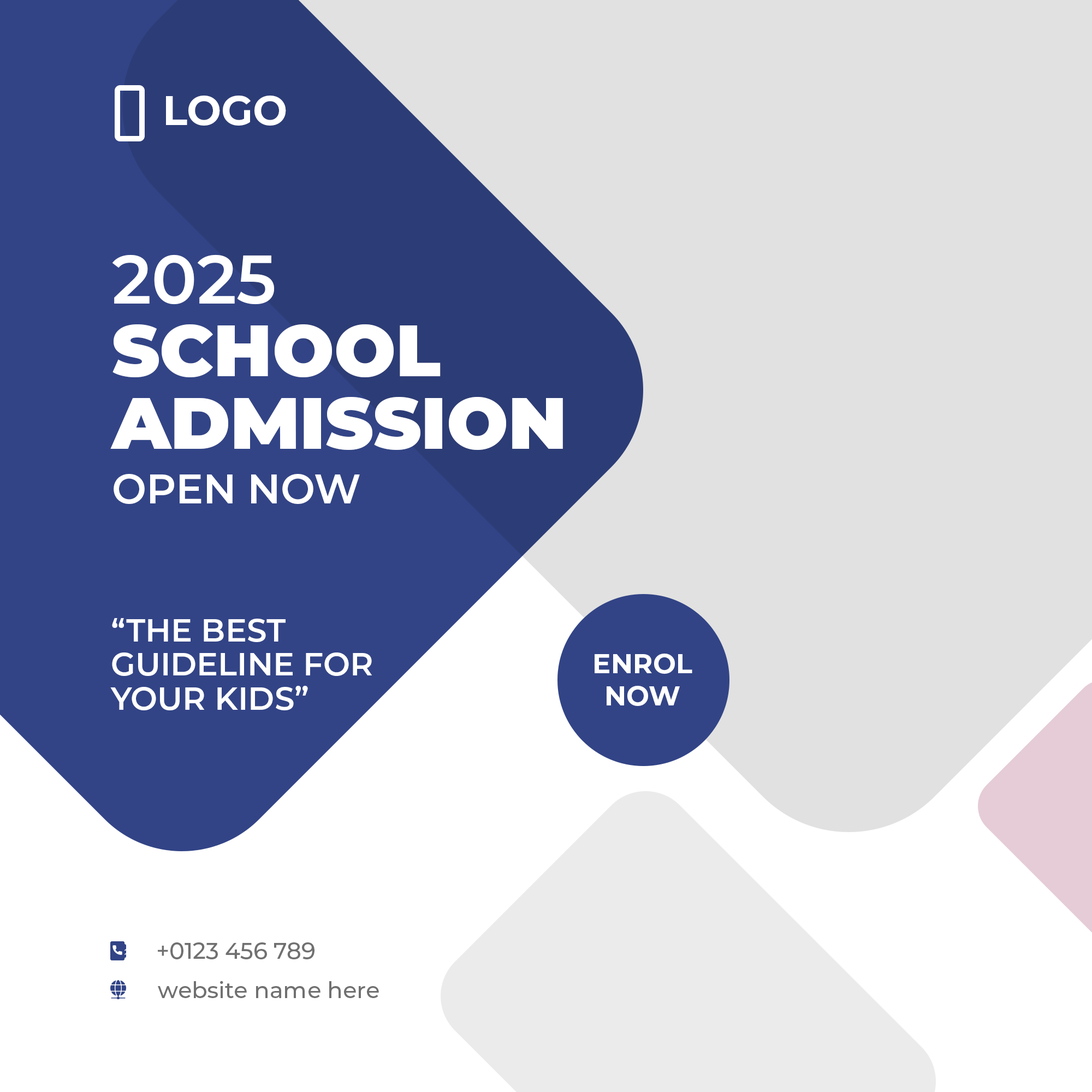
<style>
.page{position:relative;width:1092px;height:1092px;background:#e1e1e1}
.page>*{position:absolute;margin:0}
.t1{font:40.9px "Montserrat-Bold";color:#ffffff;text-transform:uppercase}
.t2{font:72.8px/72.8px "Montserrat-Black";color:#ffffff;text-transform:uppercase}
.t3{font:68.2px/72.8px "Montserrat-SemiBold";color:#ffffff;text-transform:uppercase}
.t4{font:40.9px/54.6px "Montserrat-SemiBold";color:#ffffff;text-transform:uppercase}
.t5{font:31.8px/34.1px "Montserrat-SemiBold";color:#ffffff;text-transform:uppercase}
.t6{font:27.3px/31.8px "Montserrat-Bold";color:#ffffff;text-transform:uppercase}
.t7{font:22.7px "Montserrat-Medium";color:#707070}
</style>
<div class="page">
<p class="t1" style="left:166px;top:96px;width:120px;height:30px">logo</p>
<p class="t2" style="left:110px;top:254px;width:453px;height:250px"><span class="t3">2025<br></span>school<br>admission<br><span class="t4">open now</span></p>
<p class="t5" style="left:110px;top:618px;width:262px;height:92px">“the best<br>guideline for<br>your kids”</p>
<p class="t6" style="left:595px;top:654px;width:97px;height:52px;text-align:center">enrol<br>now</p>
<p class="t7" style="left:158px;top:942px;width:156px;height:17px">+0123 456 789</p>
<p class="t7" style="left:158px;top:981px;width:221px;height:17px">website name here</p>
</div>
